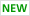
<style>
.page{position:relative;width:30px;height:16px;background:#ffffff}
.page>*{position:absolute;margin:0}
.t1{font:11px "Frutiger-Bold";color:#039803}
</style>
<div class="page">
<p class="t1" style="left:2px;top:4px;width:26px;height:8px">NEW</p>
</div>
